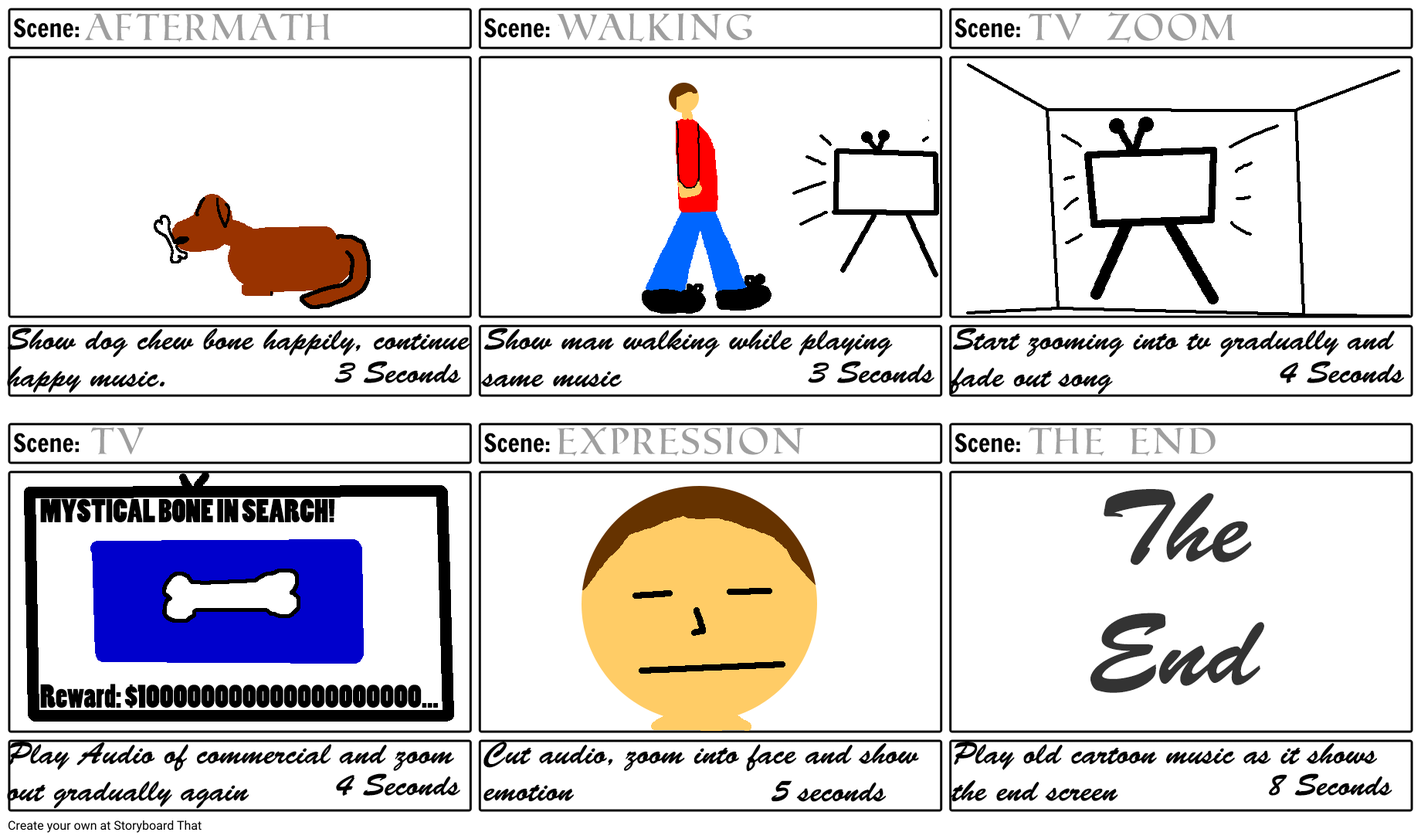
<style>
.page{position:relative;width:1421px;height:839px;background:#ffffff}
.page>*{position:absolute;margin:0}
.t1{font:37.1px "RomanSD";color:#9f9f9f}
.t2{font:30.9px "BrushScriptStd";color:#000000}
.t3{font:103px "BrushScriptStd";color:#333333}
.t4{font:30.9px "PoplarStd";color:#000000}
</style>
<div class="page">
<p class="t1" style="left:84px;top:13px;width:247px;height:29px">aftermath</p>
<p class="t1" style="left:557px;top:13px;width:195px;height:29px">Walking</p>
<p class="t1" style="left:1029px;top:12px;width:207px;height:31px">TV ZOOM</p>
<p class="t2" style="left:7px;top:328px;width:463px;height:65px">Show dog chew bone happily, continue happy music.</p>
<p class="t2" style="left:481px;top:328px;width:412px;height:60px">Show man walking while playing same music</p>
<p class="t2" style="left:950px;top:328px;width:445px;height:67px">Start zooming into tv gradually and fade out song</p>
<p class="t2" style="left:334px;top:361px;width:127px;height:22px">3 Seconds</p>
<p class="t2" style="left:808px;top:361px;width:127px;height:22px">3 Seconds</p>
<p class="t2" style="left:1280px;top:361px;width:124px;height:23px">4 Seconds</p>
<p class="t1" style="left:91px;top:427px;width:53px;height:28px">TV</p>
<p class="t1" style="left:557px;top:427px;width:247px;height:30px">Expression</p>
<p class="t1" style="left:1029px;top:427px;width:187px;height:30px">The end</p>
<p class="t3" style="left:1091px;top:489px;width:174px;height:204px;text-align:center">The<br>End</p>
<p class="t4" style="left:40px;top:498px;width:398px;height:210px">MYSTICAL BONE IN SEARCH! <br><br><br><br><br>Reward: $100000000000000000000...</p>
<p class="t2" style="left:7px;top:742px;width:447px;height:67px">Play Audio of commercial and zoom out gradually again</p>
<p class="t2" style="left:484px;top:742px;width:435px;height:60px">Cut audio, zoom into face and show emotion</p>
<p class="t2" style="left:951px;top:742px;width:426px;height:60px">Play old cartoon music as it shows the end screen</p>
<p class="t2" style="left:336px;top:773px;width:124px;height:23px">4 Seconds</p>
<p class="t2" style="left:1269px;top:773px;width:124px;height:23px">8 Seconds</p>
<p class="t2" style="left:772px;top:780px;width:115px;height:22px">5 seconds</p>
</div>
